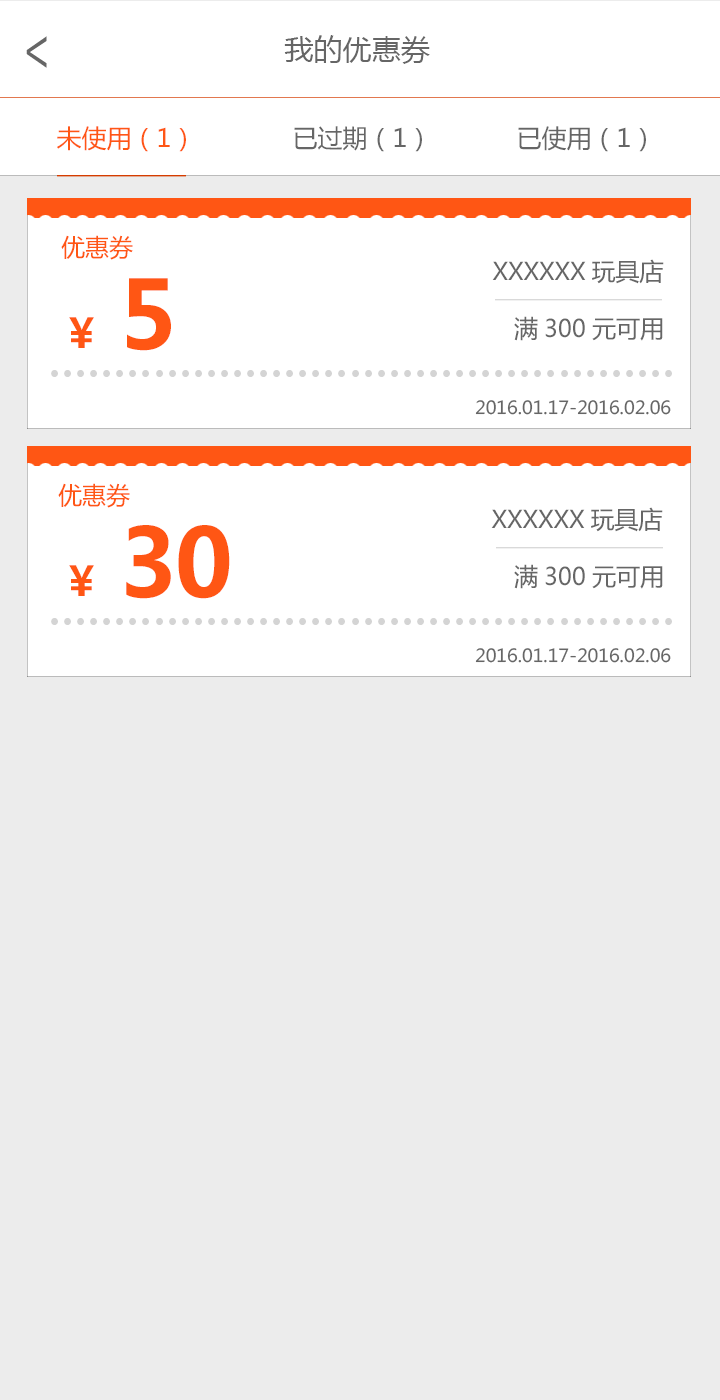
<style>
.page{position:relative;width:720px;height:1400px;background:#ececec}
.page>*{position:absolute;margin:0}
.t1{font:51.9px "AdobeHeitiStd-Regular";color:#666666;scale:0.72 1}
.t2{font:29.2px "MicrosoftYaHei";color:#666666}
.t3{font:25px "MicrosoftYaHei";color:#ff5615}
.t4{font:25px "MicrosoftYaHei";color:#666666}
.t5{font:24.3px "MicrosoftYaHei";color:#ff5614}
.t6{font:24.3px "MicrosoftYaHei";color:#666666}
.t7{font:93.6px "MicrosoftYaHei-Bold";letter-spacing:-0.02em;color:#ff5614}
.t8{font:40.8px "MicrosoftYaHei-Bold";letter-spacing:-0.02em;color:#ff5614}
.t9{font:54.3px "MicrosoftYaHei";color:#d4d4d4}
.t10{font:18px "MicrosoftYaHei";color:#666666}
</style>
<div class="page">
<p class="t1" style="left:26px;top:36px;width:21px;height:32px;rotate:180deg">&gt;</p>
<p class="t2" style="left:284px;top:35px;width:146px;height:29px">我的优惠券</p>
<p class="t3" style="left:57px;top:126px;width:129px;height:26px">未使用（1）</p>
<p class="t4" style="left:294px;top:126px;width:128px;height:26px">已过期（1）</p>
<p class="t4" style="left:518px;top:126px;width:128px;height:26px">已使用（1）</p>
<p class="t5" style="left:61px;top:235px;width:72px;height:25px">优惠券</p>
<p class="t6" style="left:492px;top:259px;width:172px;height:25px">XXXXXX玩具店</p>
<p class="t7" style="left:127px;top:278px;width:44px;height:73px">5</p>
<p class="t8" style="left:69px;top:317px;width:25px;height:31px">￥</p>
<p class="t6" style="left:514px;top:316px;width:149px;height:25px">满300元可用</p>
<p class="t9" style="left:51px;top:370px;width:621px;height:7px">................................................</p>
<p class="t10" style="left:475px;top:400px;width:196px;height:15px">2016.01.17-2016.02.06</p>
<p class="t5" style="left:58px;top:483px;width:72px;height:25px">优惠券</p>
<p class="t6" style="left:491px;top:507px;width:172px;height:25px">XXXXXX玩具店</p>
<p class="t7" style="left:126px;top:525px;width:104px;height:74px">30</p>
<p class="t8" style="left:69px;top:565px;width:25px;height:31px">￥</p>
<p class="t6" style="left:514px;top:564px;width:149px;height:25px">满300元可用</p>
<p class="t9" style="left:51px;top:618px;width:621px;height:7px">................................................</p>
<p class="t10" style="left:475px;top:648px;width:196px;height:15px">2016.01.17-2016.02.06</p>
</div>
